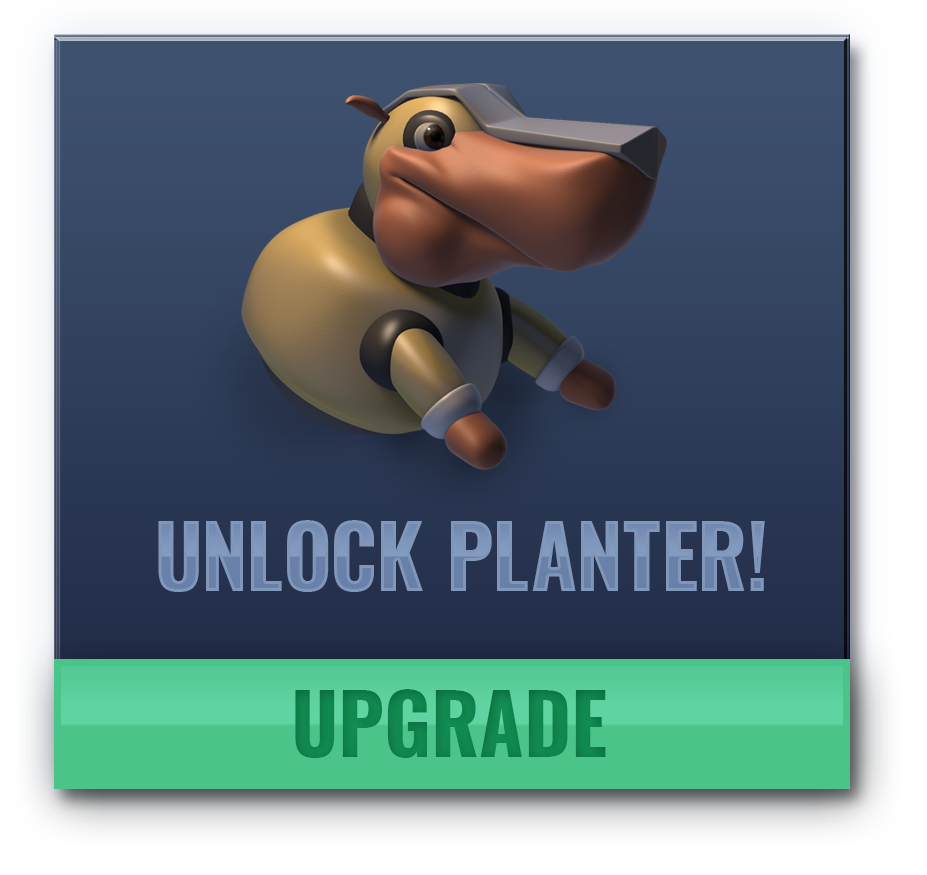
<style>
.page{position:relative;width:927px;height:875px}
.page>*{position:absolute;margin:0}
.t1{font:85.2px "Oswald-Bold";color:#6981a8}
.t2{font:81.5px "Oswald-Bold";letter-spacing:-0.005em;color:#119355}
</style>
<div class="page">
<p class="t1" style="left:158px;top:520px;width:607px;height:72px">UNLOCK PLANTER!</p>
<p class="t2" style="left:295px;top:689px;width:311px;height:69px">UPGRADE</p>
</div>
